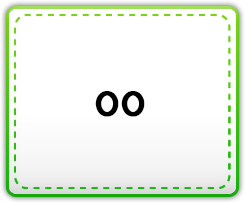
<style>
.page{position:relative;width:245px;height:203px;background:#ffffff}
.page>*{position:absolute;margin:0}
.t1{font:42px "EFUTURE1_M";color:#000000;font-weight:bold}
</style>
<div class="page">
<p class="t1" style="left:95px;top:91px;width:50px;height:26px">oo</p>
</div>
